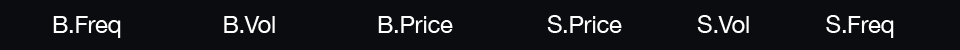
<style>
.page{position:relative;width:960px;height:50px;background:#0b0c10}
.page>*{position:absolute;margin:0}
.t1{font:24px "HelveticaNeue";letter-spacing:-0.015em;color:#ffffff}
</style>
<div class="page">
<p class="t1" style="left:53px;top:15px;width:841px;height:23px">B.Freq                B.Vol                B.Price               S.Price            S.Vol            S.Freq</p>
</div>
